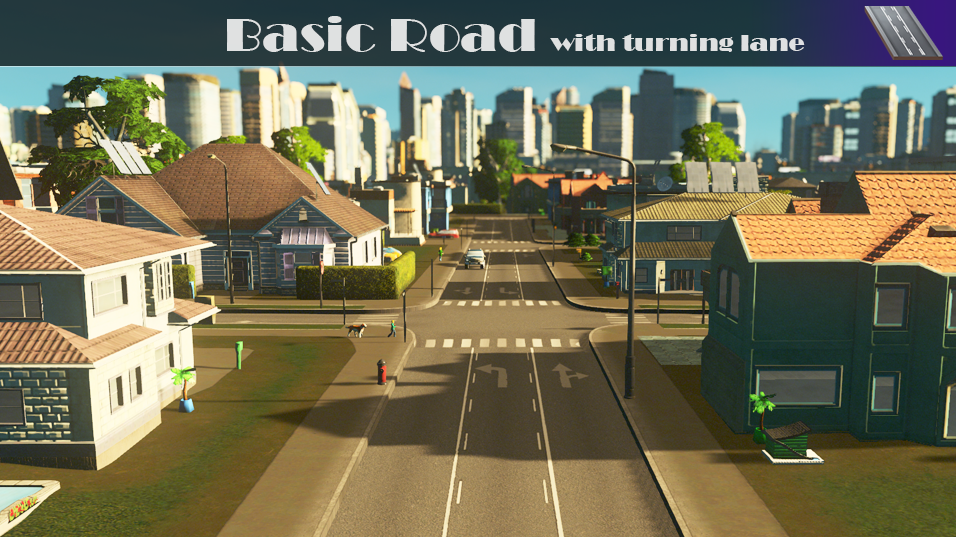
<style>
.page{position:relative;width:956px;height:537px}
.page>*{position:absolute;margin:0}
.t1{font:24px "Broadway";color:#dfe1e1;scale:1.11 1}
.t2{font:48px "Broadway";color:#dfe1e1;scale:1.11 1}
</style>
<div class="page">
<p class="t1" style="left:227px;top:16px;width:578px;height:36px"><span class="t2">Basic Road</span>  with turning lane</p>
</div>
